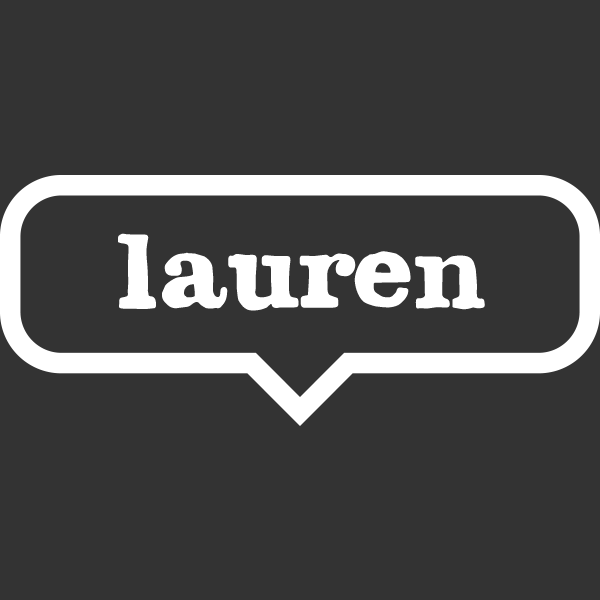
<style>
.page{position:relative;width:600px;height:600px;background:#333333}
.page>*{position:absolute;margin:0}
.t1{font:100px "LSTKClarendonBold";letter-spacing:0.05em;color:#ffffff}
</style>
<div class="page">
<p class="t1" style="left:118px;top:233px;width:367px;height:78px">lauren</p>
</div>
